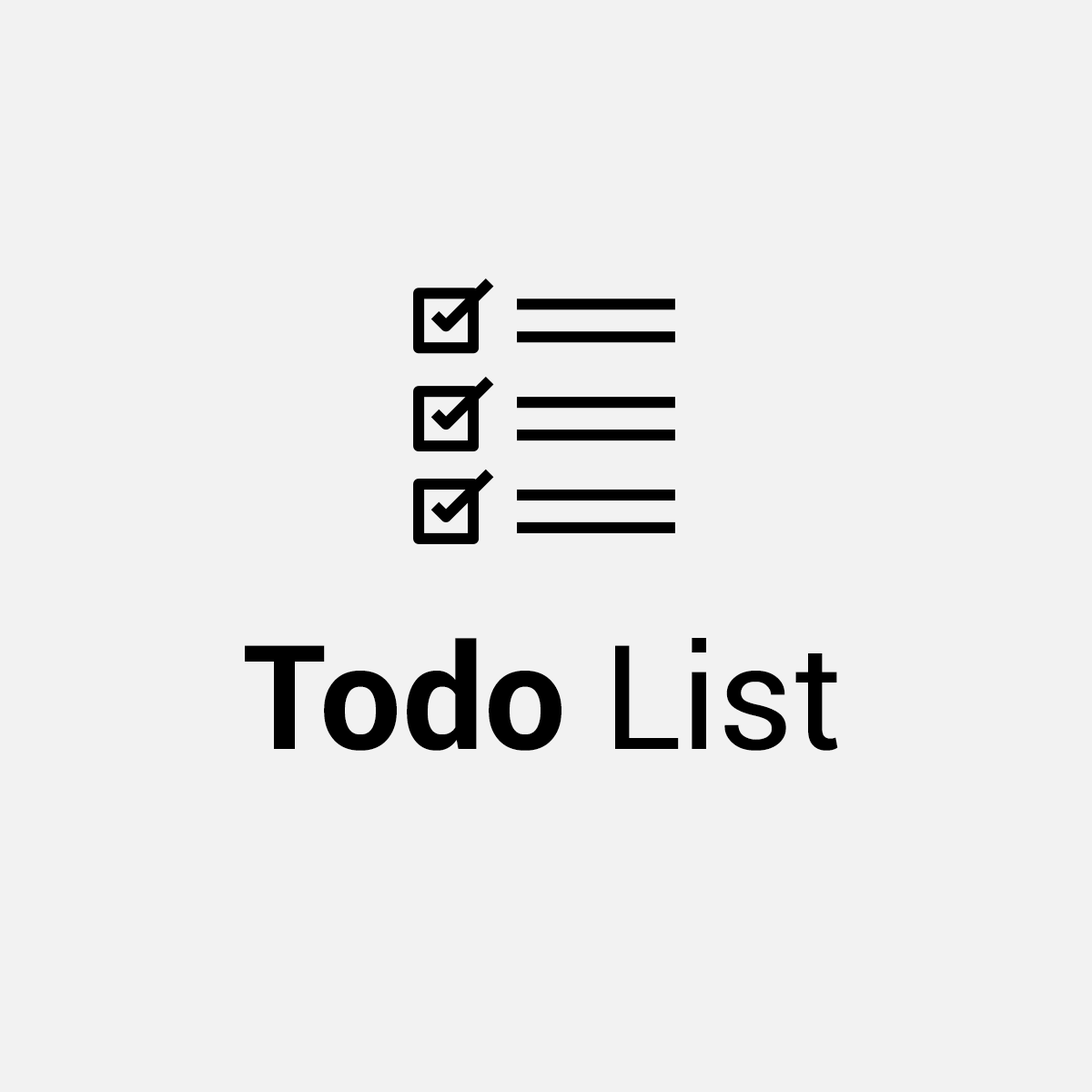
<style>
.page{position:relative;width:1092px;height:1092px;background:#f2f2f2}
.page>*{position:absolute;margin:0}
.t1{font:145.4px "Roboto-Bold";color:#000000}
.t2{font:145.4px "Roboto-Regular";color:#000000}
</style>
<div class="page">
<p class="t1" style="left:245px;top:638px;width:593px;height:113px">Todo<span class="t2"> List</span></p>
</div>
